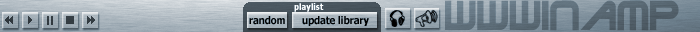
<style>
.page{position:relative;width:700px;height:32px}
.page>*{position:absolute;margin:0}
.t1{font:9px "Tahoma-Bold";color:#ffffff;scale:0.9 1}
.t2{font:45px "TerminatorTwo";color:#5b6b76;scale:0.9 1}
.t3{font:10.5px "Tahoma-Bold";color:#000000;scale:0.9 1}
</style>
<div class="page">
<p class="t1" style="left:294px;top:3px;width:30px;height:9px">playlist</p>
<p class="t2" style="left:445px;top:0px;width:234px;height:31px">WWWinamp</p>
<p class="t3" style="left:249px;top:16px;width:120px;height:10px">random      update library</p>
</div>
